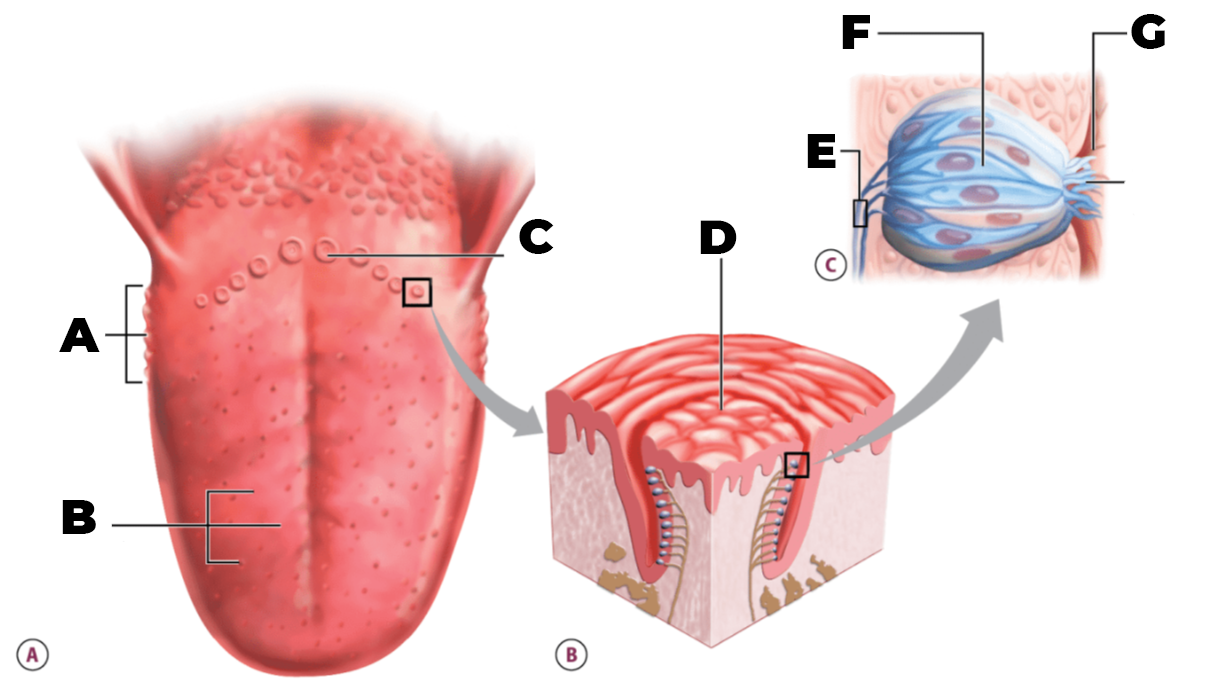
<style>
.page{position:relative;width:1219px;height:684px;background:#ffffff}
.page>*{position:absolute;margin:0}
.t1{font:48px "Montserrat-Black";color:#000000}
.t2{font:48px/14px "Montserrat-Black";color:#000000}
</style>
<div class="page">
<p class="t1" style="left:842px;top:14px;width:324px;height:35px">F                  G</p>
<p class="t1" style="left:807px;top:134px;width:29px;height:34px">E</p>
<p class="t1" style="left:519px;top:219px;width:218px;height:35px">C          D</p>
<p class="t2" style="left:59px;top:318px;width:41px;height:216px">A<br><br><br><br><br><br><br><br><br><br><br><br><br>B</p>
</div>
